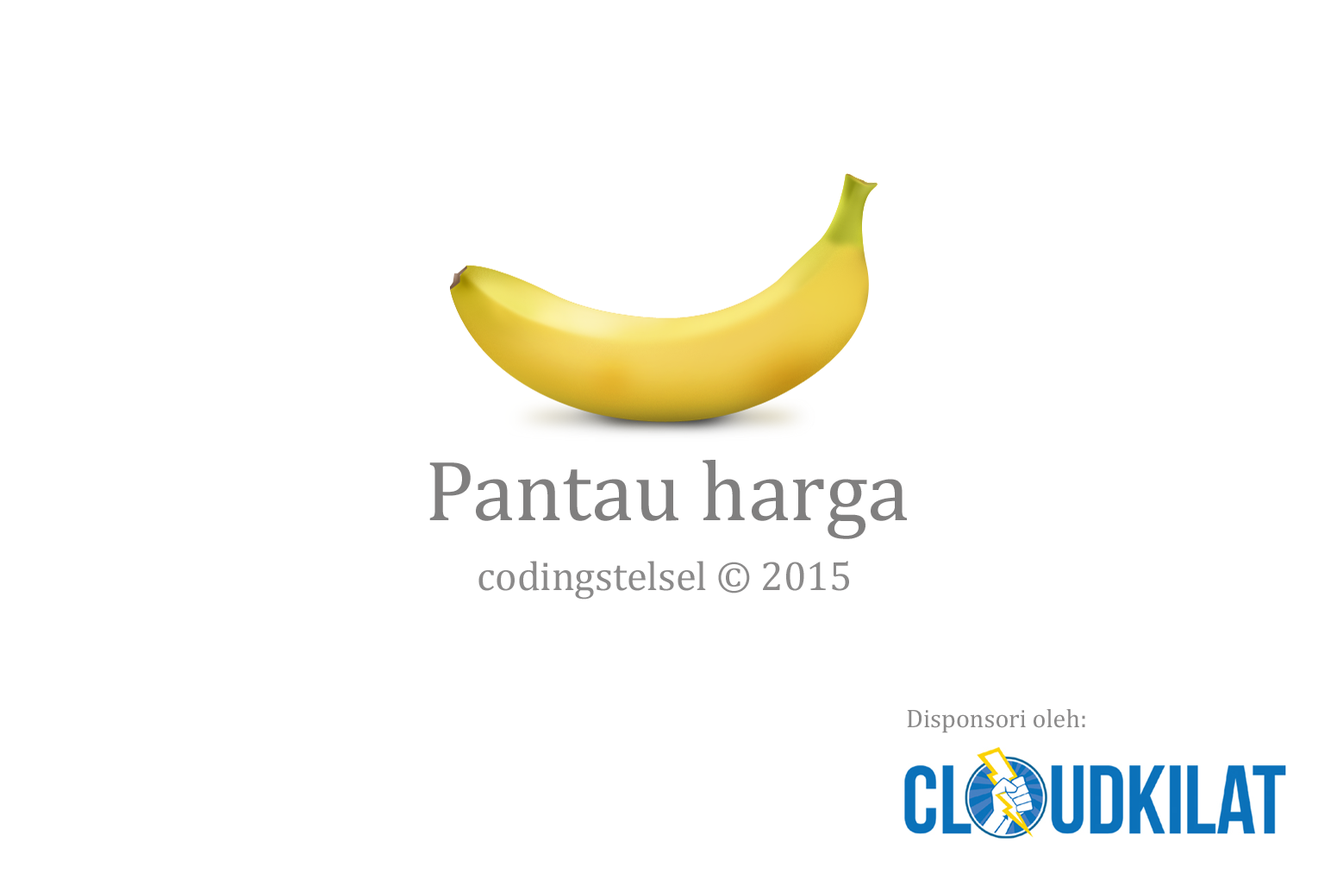
<style>
.page{position:relative;width:1337px;height:892px;background:#ffffff}
.page>*{position:absolute;margin:0}
.t1{font:86.1px "Cambria";color:#807f7f}
.t2{font:41.4px "Cambria";color:#8b8a8a}
.t3{font:25.8px "Cambria";color:#8b8a8a}
</style>
<div class="page">
<p class="t1" style="left:429px;top:460px;width:478px;height:79px">Pantau harga</p>
<p class="t2" style="left:479px;top:560px;width:370px;height:39px">codingstelsel © 2015</p>
<p class="t3" style="left:907px;top:709px;width:179px;height:24px">Disponsori oleh:</p>
</div>
